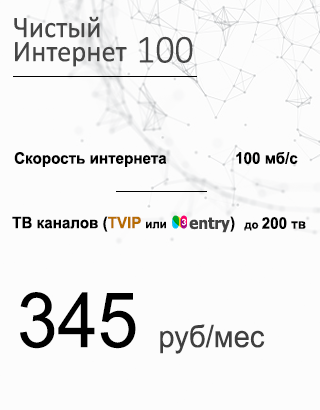
<style>
.page{position:relative;width:320px;height:410px;background:#fcfcfc}
.page>*{position:absolute;margin:0}
.t1{font:30px/24px "Calibri";color:#464646;scale:0.95 1}
.t2{font:39.8px "Calibri-Light";color:#464646;scale:0.95 1}
.t3{font:16px "Arial-BoldMT";color:#000000;scale:0.95 1}
.t4{font:16px "Arial-BoldMT";color:#b76c00;scale:0.95 1}
.t5{font:12px "Arial-BoldMT";color:#000000;scale:0.95 1}
.t6{font:16px "Tahoma-Bold";color:#424242;scale:0.95 1}
.t7{font:14px "Arial-BoldMT";color:#000000;scale:0.95 1}
.t8{font:30.6px "ArialMT";color:#3f3f3f;scale:0.95 1}
.t9{font:76.4px "ArialMT";color:#000000;scale:0.95 1}
</style>
<div class="page">
<p class="t1" style="left:14px;top:16px;width:113px;height:51px">Чистый<br>Интернет</p>
<p class="t2" style="left:139px;top:36px;width:54px;height:27px">100</p>
<p class="t3" style="left:14px;top:152px;width:153px;height:15px">Скорость интернета</p>
<p class="t3" style="left:236px;top:152px;width:62px;height:12px">100 мб/с</p>
<p class="t3" style="left:12px;top:216px;width:223px;height:16px">ТВ каналов (<span class="t4">TVIP </span><span class="t5">или                    </span>)</p>
<p class="t6" style="left:189px;top:217px;width:41px;height:16px">entry</p>
<p class="t3" style="left:244px;top:217px;width:62px;height:14px"><span class="t5">до </span>200 <span class="t7">тв</span></p>
<p class="t8" style="left:20px;top:292px;width:245px;height:62px"><span class="t9">345 </span>руб/мес</p>
</div>
